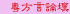
<style>
.page{position:relative;width:70px;height:14px;background:#f0c0f0}
.page>*{position:absolute;margin:0}
.t1{font:12px "IDLiLight"}
</style>
<div class="page">
<p class="t1" style="left:11px;top:2px;width:58px;height:10px">粵方言論壇</p>
</div>
